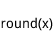
<style>
.page{position:relative;width:53px;height:41px;background:#ffffff}
.page>*{position:absolute;margin:0}
.t1{font:13.4px "DroidSans";color:#000000}
</style>
<div class="page">
<p class="t1" style="left:1px;top:17px;width:52px;height:14px">round(x)</p>
</div>
